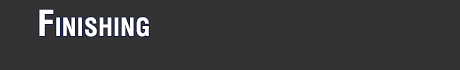
<style>
.page{position:relative;width:460px;height:70px;background:#333333}
.page>*{position:absolute;margin:0}
.t1{font:36px "Warhelios-BoldWeb";letter-spacing:0.03em;color:#ffffff;font-variant:small-caps}
</style>
<div class="page">
<p class="t1" style="left:39px;top:9px;width:110px;height:28px">Finishing</p>
</div>
